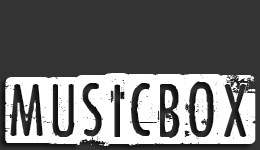
<style>
.page{position:relative;width:260px;height:150px;background:#333333}
.page>*{position:absolute;margin:0}
.t1{font:71.7px "PunkRockShow-Regular";color:#ffffff;scale:1.09 1}
</style>
<div class="page">
<p class="t1" style="left:5px;top:73px;width:251px;height:73px">musicbox</p>
</div>
